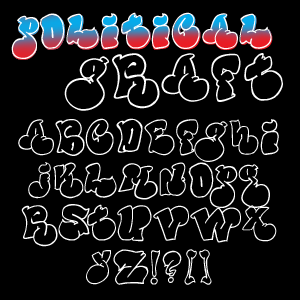
<style>
.page{position:relative;width:300px;height:300px;background:#000000}
.page>*{position:absolute;margin:0}
.t1{font:36px "PoliticalGraftOutline";color:#ffffff}
.t2{font:48px "PoliticalGraftOutline";color:#ffffff}
</style>
<div class="page">
<p class="t1" style="left:11px;top:12px;width:261px;height:47px">Political</p>
<p class="t2" style="left:64px;top:53px;width:219px;height:58px">graft</p>
<p class="t1" style="left:18px;top:118px;width:261px;height:167px;text-align:center">abcdefghi<br>jklmnopq<br>rstuvwx<br>yz!?[]</p>
</div>
